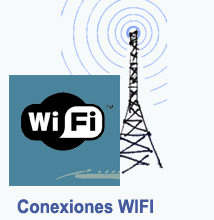
<style>
.page{position:relative;width:214px;height:220px;background:#f7fafb}
.page>*{position:absolute;margin:0}
.t1{font:18.7px "Arial-BoldMT";color:#435a9e;scale:0.91 1}
</style>
<div class="page">
<p class="t1" style="left:17px;top:199px;width:136px;height:15px">Conexiones WIFI</p>
</div>
